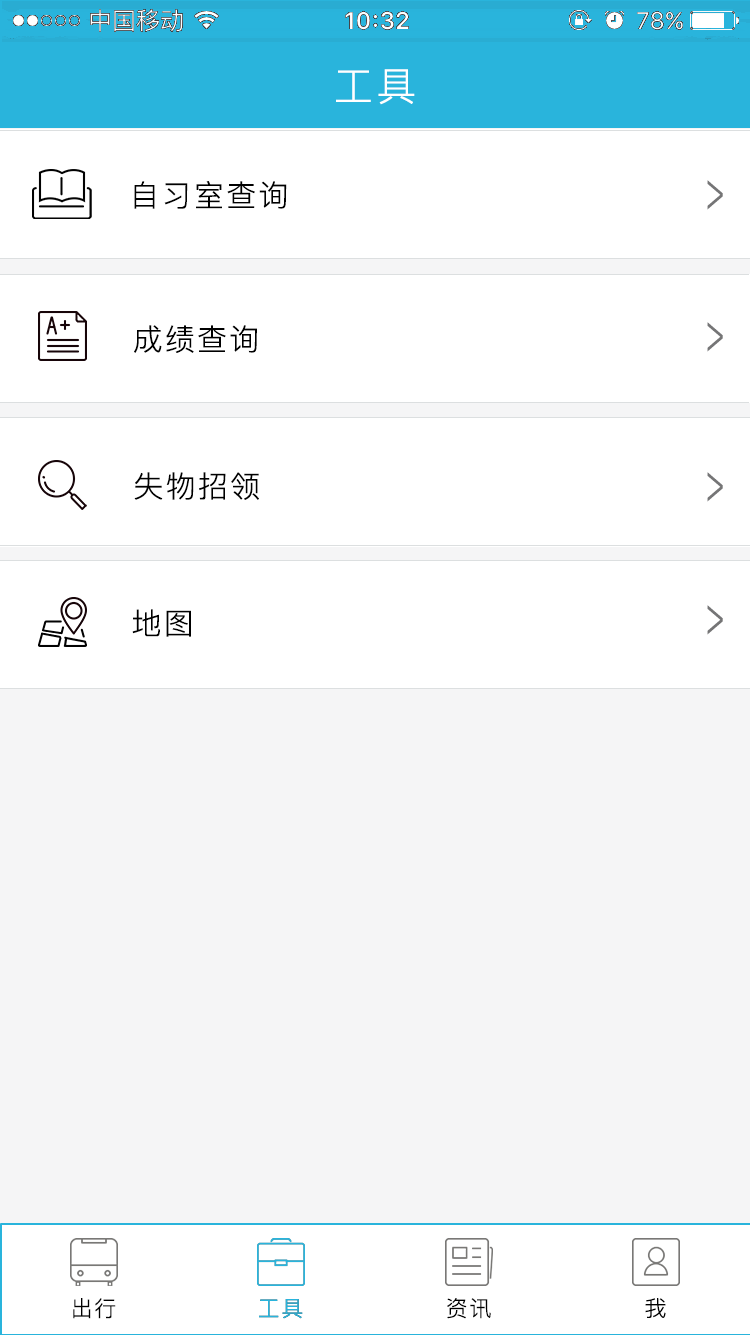
<style>
.page{position:relative;width:750px;height:1335px;background:#f5f5f6}
.page>*{position:absolute;margin:0}
.t1{font:40px "PingFang-SC-Regular";letter-spacing:0.075em;color:#ffffff}
.t2{font:30px "PingFang-SC-Regular";letter-spacing:0.075em;color:#000000}
.t3{font:56.7px "PingFang-SC-Regular";letter-spacing:0.075em;color:#757576;scale:0.53 1}
.t4{font:22px "PingFang-SC-Regular";letter-spacing:0.075em;color:#000000}
.t5{font:22px "PingFang-SC-Regular";letter-spacing:0.075em;color:#29b4dc}
</style>
<div class="page">
<p class="t1" style="left:336px;top:69px;width:79px;height:36px">工具</p>
<p class="t2" style="left:134px;top:181px;width:153px;height:28px">自习室查询</p>
<p class="t3" style="left:707px;top:180px;width:16px;height:30px">&gt;</p>
<p class="t2" style="left:134px;top:325px;width:123px;height:28px">成绩查询</p>
<p class="t3" style="left:707px;top:322px;width:16px;height:30px">&gt;</p>
<p class="t2" style="left:134px;top:472px;width:125px;height:28px">失物招领</p>
<p class="t3" style="left:707px;top:472px;width:16px;height:30px">&gt;</p>
<p class="t3" style="left:707px;top:605px;width:16px;height:30px">&gt;</p>
<p class="t2" style="left:132px;top:609px;width:59px;height:28px">地图</p>
<p class="t4" style="left:73px;top:1298px;width:43px;height:21px">出行</p>
<p class="t5" style="left:259px;top:1299px;width:44px;height:20px">工具</p>
<p class="t5" style="left:259px;top:1299px;width:44px;height:20px">工具</p>
<p class="t4" style="left:447px;top:1298px;width:44px;height:21px">资讯</p>
<p class="t4" style="left:645px;top:1298px;width:21px;height:20px">我</p>
</div>
